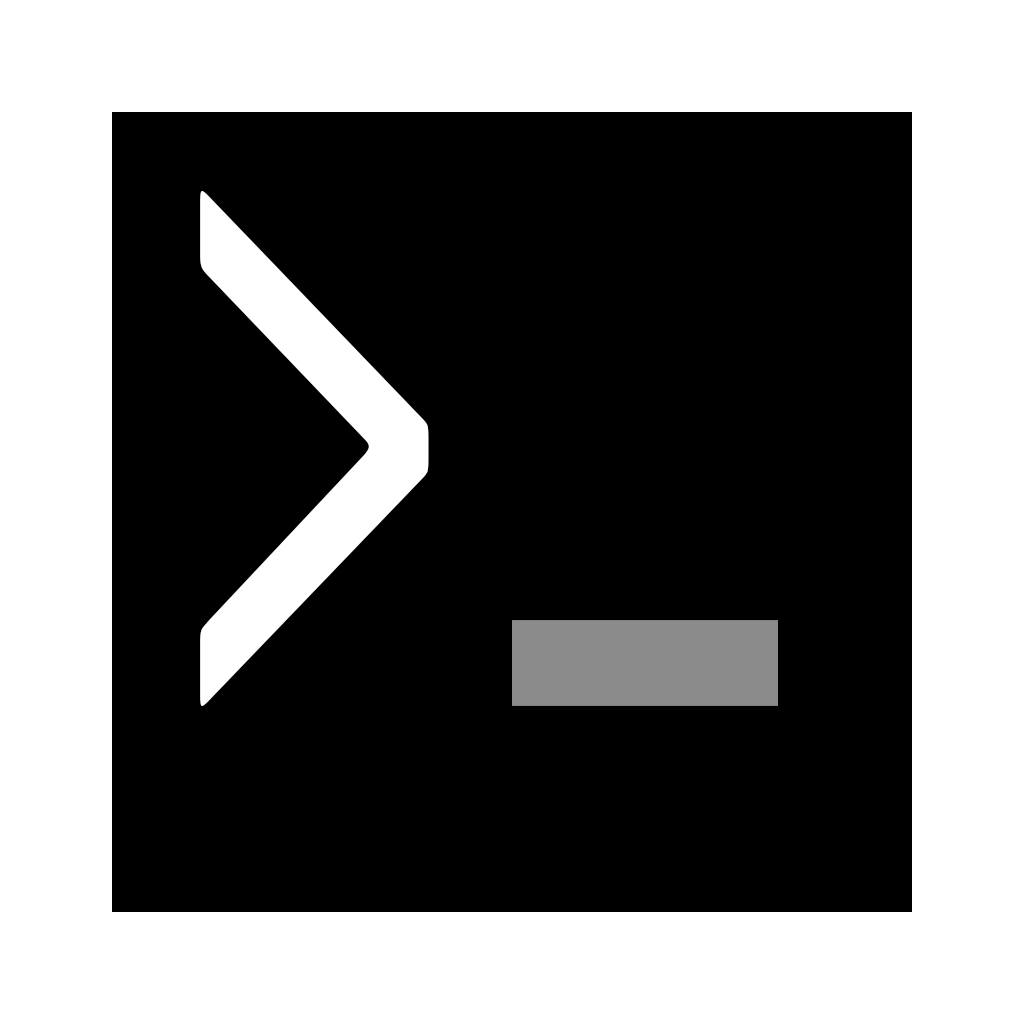
<style>
.page{position:relative;width:1024px;height:1024px;background:#000000}
.page>*{position:absolute;margin:0}
.t1{font:533.3px "NanumGothicCoding-Bold";color:#ffffff}
</style>
<div class="page">
<p class="t1" style="left:200px;top:191px;width:229px;height:515px">&gt;</p>
</div>
